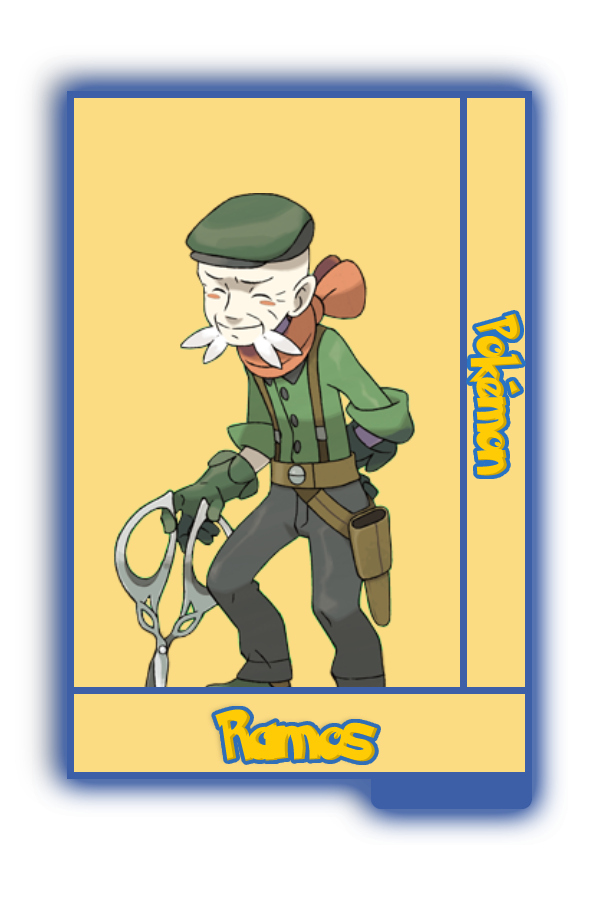
<style>
.page{position:relative;width:600px;height:900px;background:#fbdc83}
.page>*{position:absolute;margin:0}
.t1{font:48.8px "PokemonSolidNormal";color:#ffcb05;scale:0.8 1}
.t2{font:56.6px "PokemonSolidNormal";color:#ffcb05;scale:0.92 1}
</style>
<div class="page">
<p class="t1" style="left:469px;top:313px;width:54px;height:163px;rotate:90deg">Pokémon</p>
<p class="t2" style="left:215px;top:709px;width:163px;height:53px">Ramos</p>
</div>
